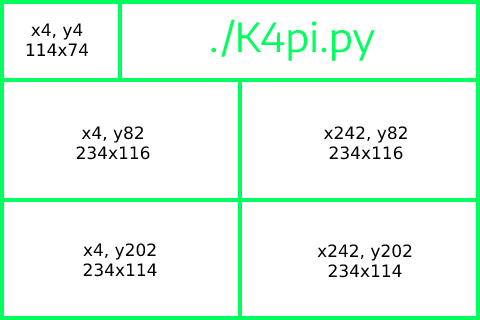
<style>
.page{position:relative;width:480px;height:320px;background:#ffffff}
.page>*{position:absolute;margin:0}
.t1{font:17px "DejaVuSans";color:#000000}
.t2{font:40px "EncodeSansSemiExpanded-Regular";color:#00ff5f}
</style>
<div class="page">
<p class="t1" style="left:26px;top:23px;width:63px;height:33px;text-align:center">x4, y4<br>114x74</p>
<p class="t2" style="left:211px;top:19px;width:164px;height:42px">./K4pi.py</p>
<p class="t1" style="left:76px;top:126px;width:74px;height:34px;text-align:center">x4, y82<br>234x116</p>
<p class="t1" style="left:323px;top:126px;width:84px;height:34px;text-align:center">x242, y82<br>234x116</p>
<p class="t1" style="left:83px;top:243px;width:74px;height:34px;text-align:center">x4, y202<br>234x114</p>
<p class="t1" style="left:317px;top:244px;width:95px;height:34px;text-align:center">x242, y202<br>234x114</p>
</div>
